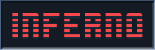
<style>
.page{position:relative;width:155px;height:50px;background:#151b24}
.page>*{position:absolute;margin:0}
.t1{font:36px "Cornerstone"}
</style>
<div class="page">
<p class="t1" style="left:12px;top:13px;width:131px;height:26px">inferno</p>
</div>
